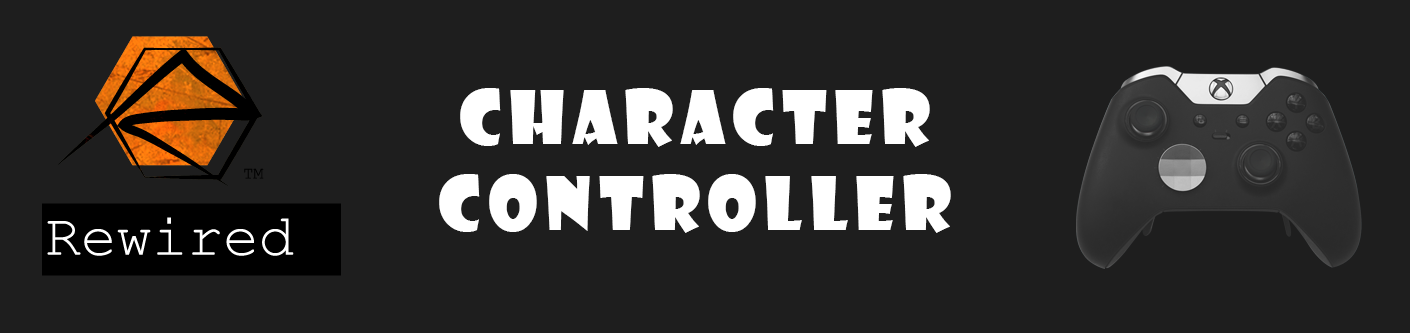
<style>
.page{position:relative;width:1410px;height:333px;background:#1e1e1e}
.page>*{position:absolute;margin:0}
.t1{font:72px "ShowcardGothic-Reg";letter-spacing:0.1em;color:#ffffff}
</style>
<div class="page">
<p class="t1" style="left:439px;top:88px;width:512px;height:145px;text-align:center">Character Controller</p>
</div>
